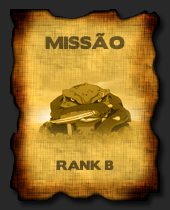
<style>
.page{position:relative;width:170px;height:210px}
.page>*{position:absolute;margin:0}
.t1{font:16px "BorisBlackBloxx";color:#655120}
.t2{font:12px "BorisBlackBloxx";color:#645020}
</style>
<div class="page">
<p class="t1" style="left:45px;top:32px;width:80px;height:18px">MISSÃO</p>
<p class="t2" style="left:56px;top:160px;width:58px;height:10px">RANK B</p>
</div>
